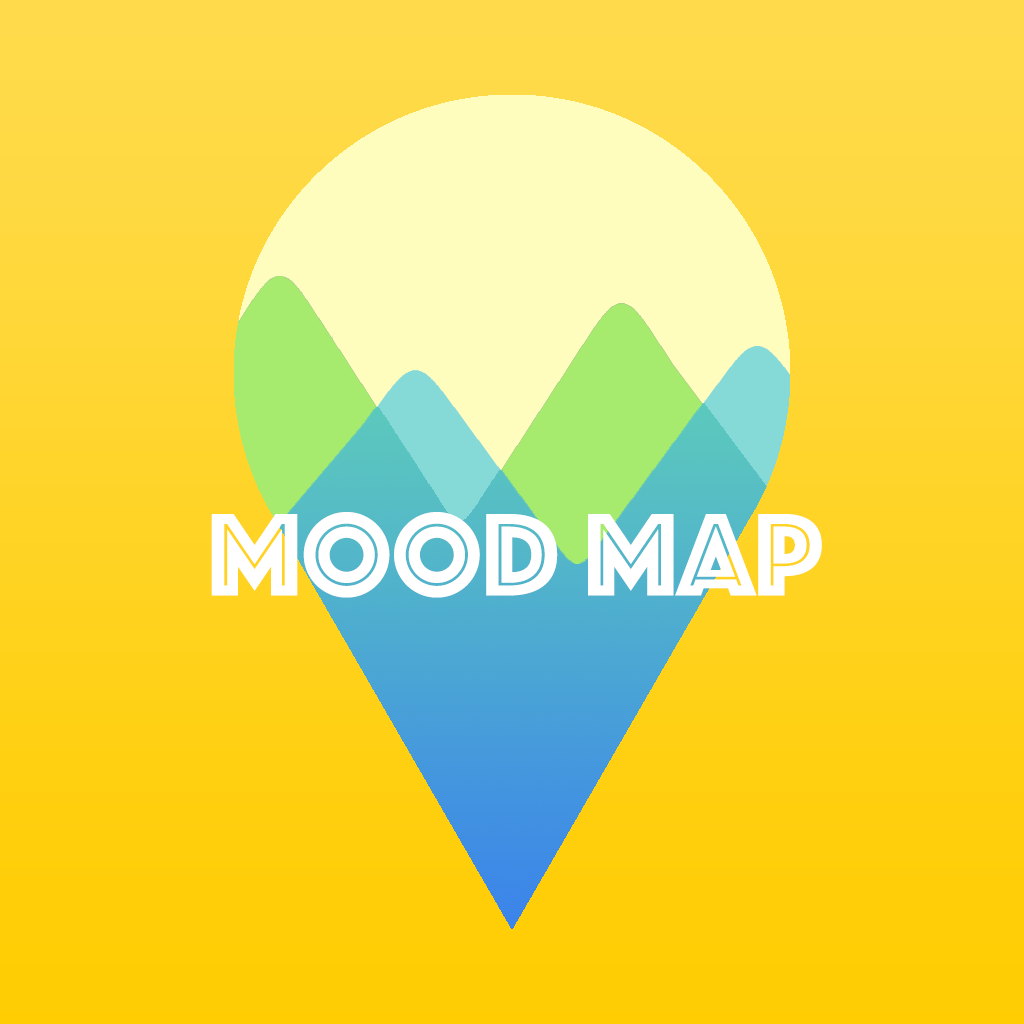
<style>
.page{position:relative;width:1024px;height:1024px}
.page>*{position:absolute;margin:0}
.t1{font:122px "Phosphate-Inline";color:#ffffff}
</style>
<div class="page">
<p class="t1" style="left:211px;top:512px;width:611px;height:86px">Mood Map</p>
</div>
